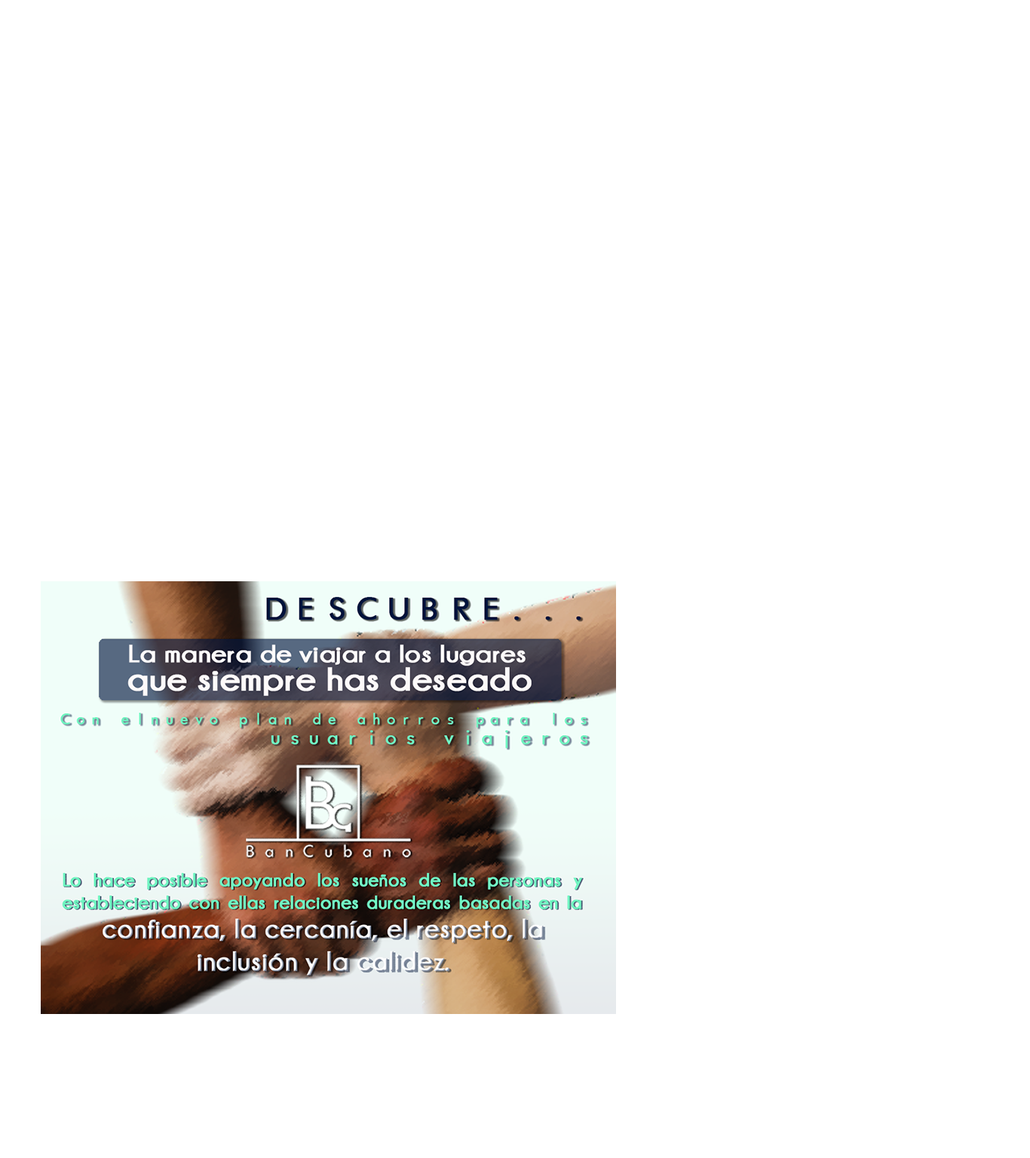
<style>
.page{position:relative;width:1030px;height:1158px;background:#ffffff}
.page>*{position:absolute;margin:0}
.t1{font:30px "FuturistFixedWidth-Regular";color:#00153d;font-weight:bold}
.t2{font:24.8px "Champagne&Limousines-Bold";color:#fdf9f9;font-weight:bold;scale:1.11 1}
.t3{font:32.7px "Champagne&Limousines-Bold";color:#fdf9f9;font-weight:bold;scale:1.11 1}
.t4{font:14.4px "FuturistFixedWidth-Regular";color:#70f3c0;font-weight:bold}
.t5{font:18.8px "FuturistFixedWidth-Regular";color:#70f3c0;font-weight:bold}
.t6{font:18.8px "Champagne&Limousines-Bold";color:#70f3c0;font-weight:bold}
.t7{font:27.5px "Champagne&Limousines-Bold";font-weight:bold}
</style>
<div class="page">
<p class="t1" style="left:267px;top:597px;width:314px;height:23px">DESCUBRE...</p>
<p class="t2" style="left:130px;top:645px;width:395px;height:21px">La manera de viajar a los lugares</p>
<p class="t3" style="left:127px;top:666px;width:404px;height:30px">que siempre has deseado</p>
<p class="t4" style="left:60px;top:713px;width:527px;height:15px">Con elnuevo plan de ahorros para los</p>
<p class="t5" style="left:271px;top:730px;width:317px;height:19px">usuarios viajeros</p>
<p class="t6" style="left:62px;top:873px;width:520px;height:37px;text-align:justify">Lo hace posible apoyando los sueños de las personas y estableciendo con ellas relaciones duraderas basadas en la</p>
<p class="t7" style="left:103px;top:918px;width:441px;height:58px;text-align:center">confianza, la cercanía, el respeto, la inclusión y la calidez.</p>
</div>
